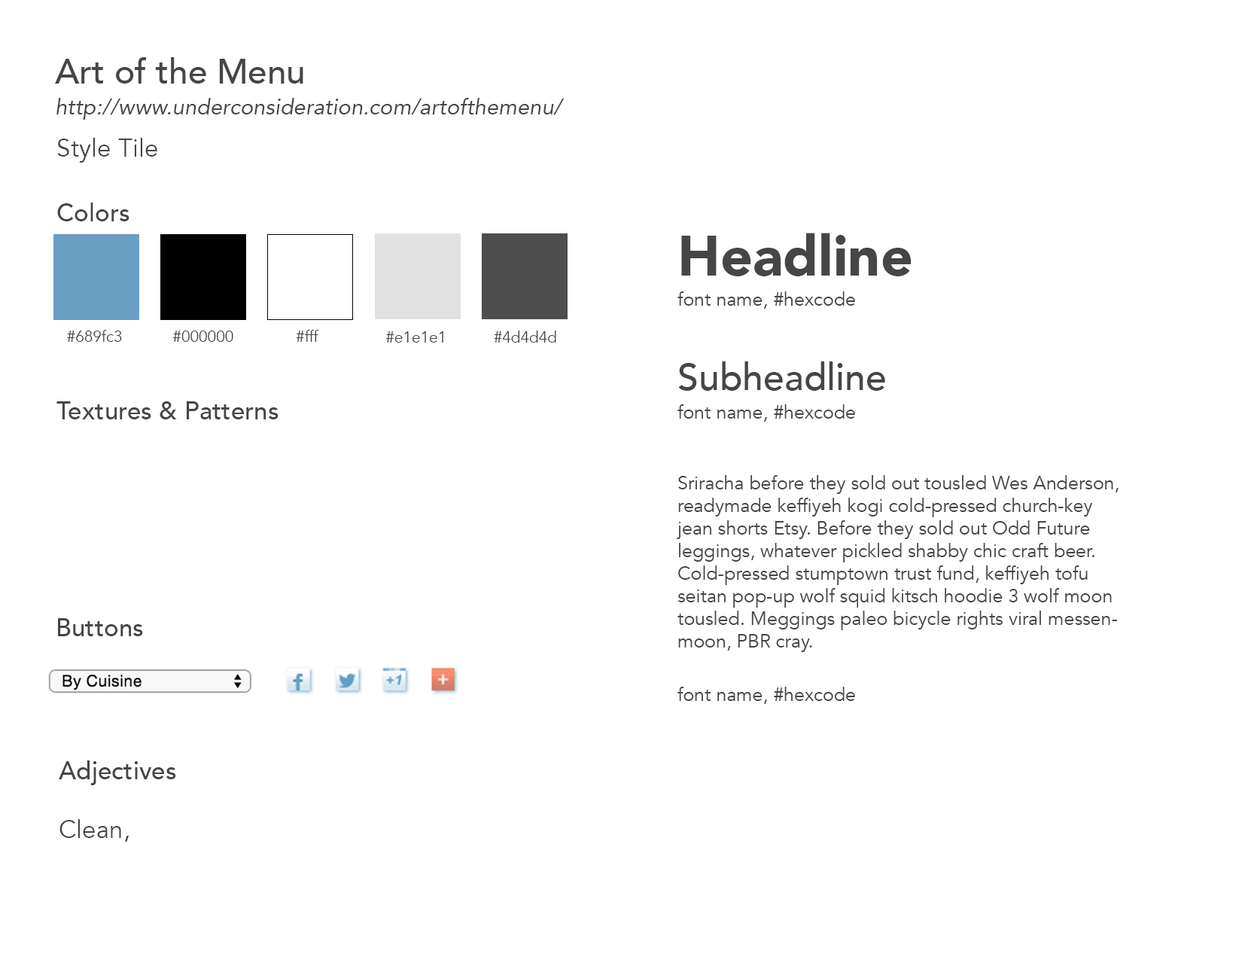
<style>
.page{position:relative;width:1242px;height:960px;background:#ffffff}
.page>*{position:absolute;margin:0}
.t1{font:22px/31.4px "Avenir-Oblique";color:#464646}
.t2{font:34.5px "Avenir-Medium";color:#464646}
.t3{font:25.1px "Avenir-Book";color:#464646}
.t4{font:25.1px "Avenir-Medium";color:#464646}
.t5{font:56.5px "Avenir-Black";color:#464646}
.t6{font:18.8px "Avenir-Book";color:#464646}
.t7{font:15.7px "Avenir-Book";color:#464646}
.t8{font:37.6px "Avenir-Medium";color:#464646}
</style>
<div class="page">
<p class="t1" style="left:55px;top:57px;width:510px;height:63px"><span class="t2">Art of the Menu<br></span>http://www.underconsideration.com/artofthemenu/</p>
<p class="t3" style="left:57px;top:138px;width:100px;height:25px">Style Tile</p>
<p class="t4" style="left:57px;top:203px;width:72px;height:18px">Colors</p>
<p class="t5" style="left:681px;top:233px;width:231px;height:43px">Headline</p>
<p class="t6" style="left:678px;top:291px;width:177px;height:18px">font name, #hexcode</p>
<p class="t7" style="left:67px;top:330px;width:55px;height:12px">#689fc3</p>
<p class="t7" style="left:296px;top:330px;width:23px;height:12px">#fff</p>
<p class="t7" style="left:172px;top:331px;width:61px;height:11px">#000000</p>
<p class="t7" style="left:385px;top:331px;width:58px;height:12px">#e1e1e1</p>
<p class="t7" style="left:494px;top:331px;width:62px;height:12px">#4d4d4d</p>
<p class="t8" style="left:678px;top:361px;width:207px;height:30px">Subheadline</p>
<p class="t4" style="left:56px;top:401px;width:223px;height:18px">Textures &amp; Patterns</p>
<p class="t6" style="left:678px;top:404px;width:177px;height:18px">font name, #hexcode</p>
<p class="t6" style="left:677px;top:475px;width:442px;height:177px">Sriracha before they sold out tousled Wes Anderson, readymade keffiyeh kogi cold-pressed church-key jean shorts Etsy. Before they sold out Odd Future leggings, whatever pickled shabby chic craft beer. Cold-pressed stumptown trust fund, keffiyeh tofu seitan pop-up wolf squid kitsch hoodie 3 wolf moon tousled. Meggings paleo bicycle rights viral messenmoon, PBR cray.</p>
<p class="t4" style="left:58px;top:618px;width:85px;height:18px">Buttons</p>
<p class="t6" style="left:678px;top:687px;width:177px;height:17px">font name, #hexcode</p>
<p class="t4" style="left:59px;top:760px;width:117px;height:25px">Adjectives</p>
<p class="t3" style="left:59px;top:819px;width:70px;height:23px">Clean,</p>
</div>
